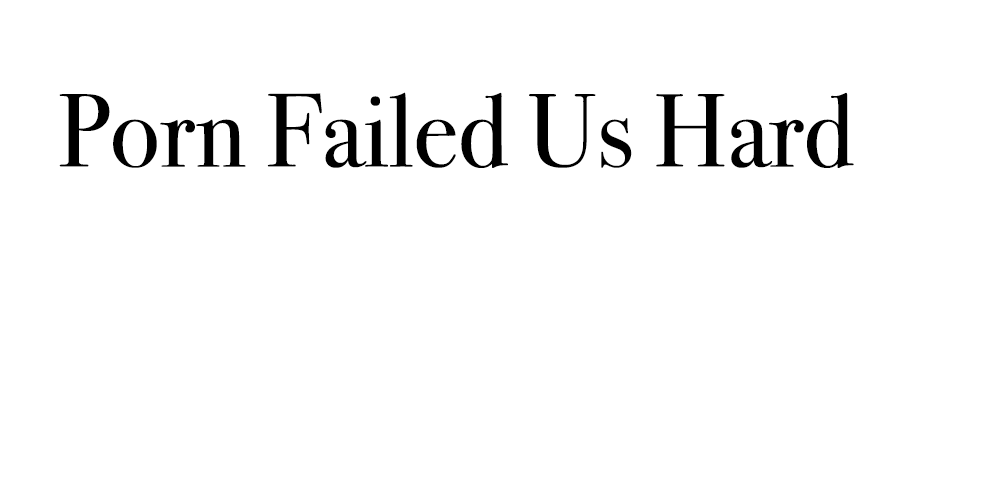
<style>
.page{position:relative;width:1000px;height:500px;background:#ffffff}
.page>*{position:absolute;margin:0}
.t1{font:104px "BodoniSvtyTwoITCTT-Book";color:#000000}
</style>
<div class="page">
<p class="t1" style="left:59px;top:92px;width:795px;height:76px">Porn Failed Us Hard</p>
</div>
